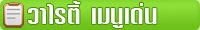
<style>
.page{position:relative;width:200px;height:30px}
.page>*{position:absolute;margin:0}
.t1{font:27.1px "DSNPatPong";color:#ffffff;scale:1.74 1}
.t2{font:34.4px "DSNPatPong";color:#ffffff;scale:1.37 1}
</style>
<div class="page">
<p class="t1" style="left:28px;top:1px;width:129px;height:27px">วาไรตี้ เมนูเดน</p>
<p class="t2" style="left:140px;top:3px;width:3px;height:3px">่</p>
</div>
